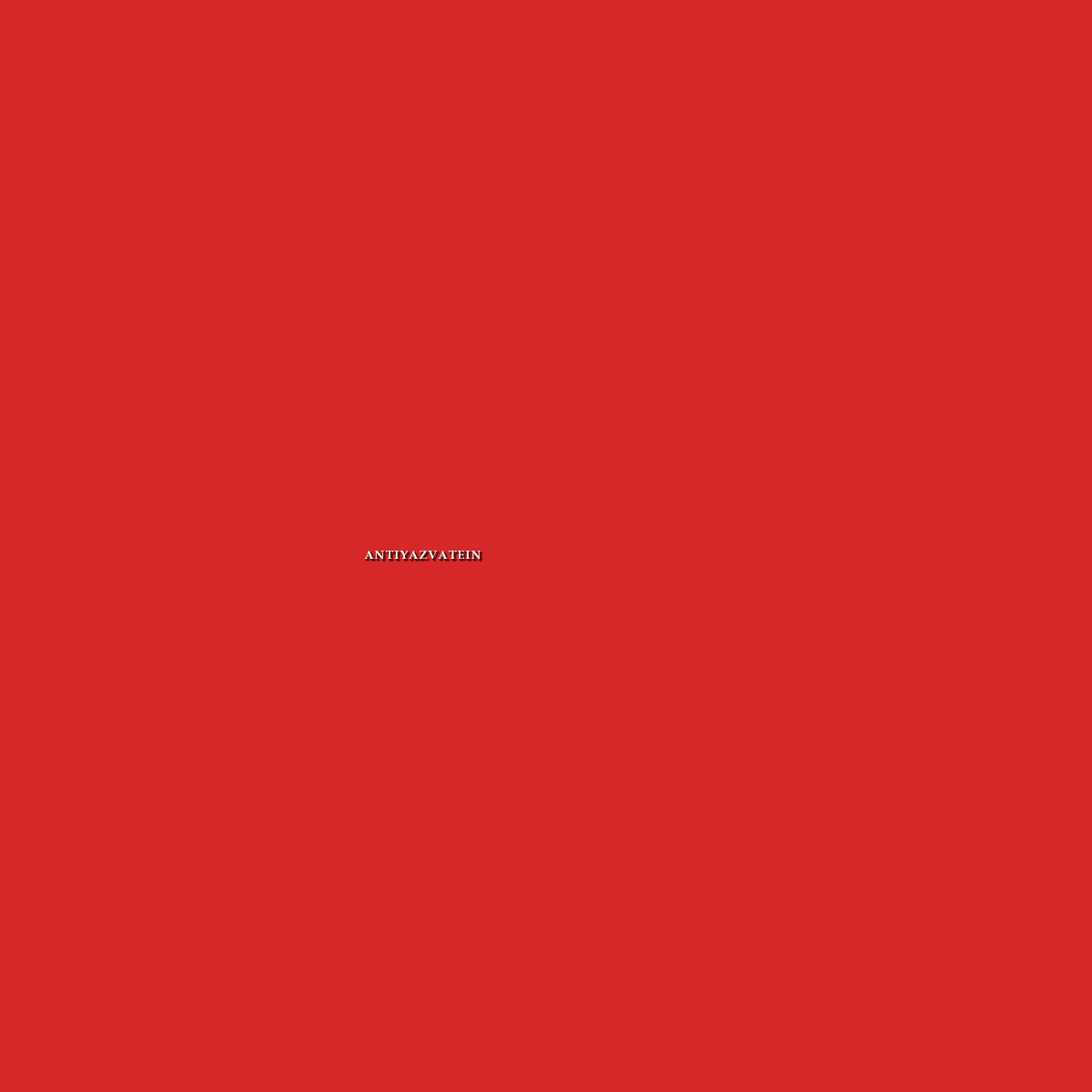
<style>
.page{position:relative;width:1092px;height:1092px;background:#d62829}
.page>*{position:absolute;margin:0}
.t1{font:11.6px "BookAntiqua-Bold";letter-spacing:0.1em;color:#f7f4f1}
</style>
<div class="page">
<p class="t1" style="left:364px;top:551px;width:116px;height:9px">ANTIYAZVATEIN</p>
</div>
